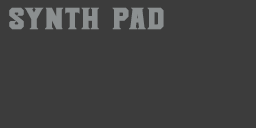
<style>
.page{position:relative;width:256px;height:128px;background:#3c3c3c}
.page>*{position:absolute;margin:0}
.t1{font:30px "COMPANYRegular";color:#8b8f90;font-variant:small-caps;font-weight:bold}
</style>
<div class="page">
<p class="t1" style="left:9px;top:7px;width:155px;height:23px">SYNTH PAD</p>
</div>
